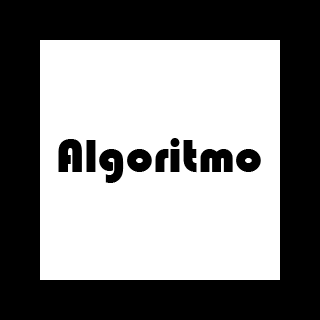
<style>
.page{position:relative;width:320px;height:320px;background:#ffffff}
.page>*{position:absolute;margin:0}
.t1{font:48px "Bauhaus93";color:#000000}
</style>
<div class="page">
<p class="t1" style="left:58px;top:138px;width:203px;height:45px">Algoritmo</p>
</div>
